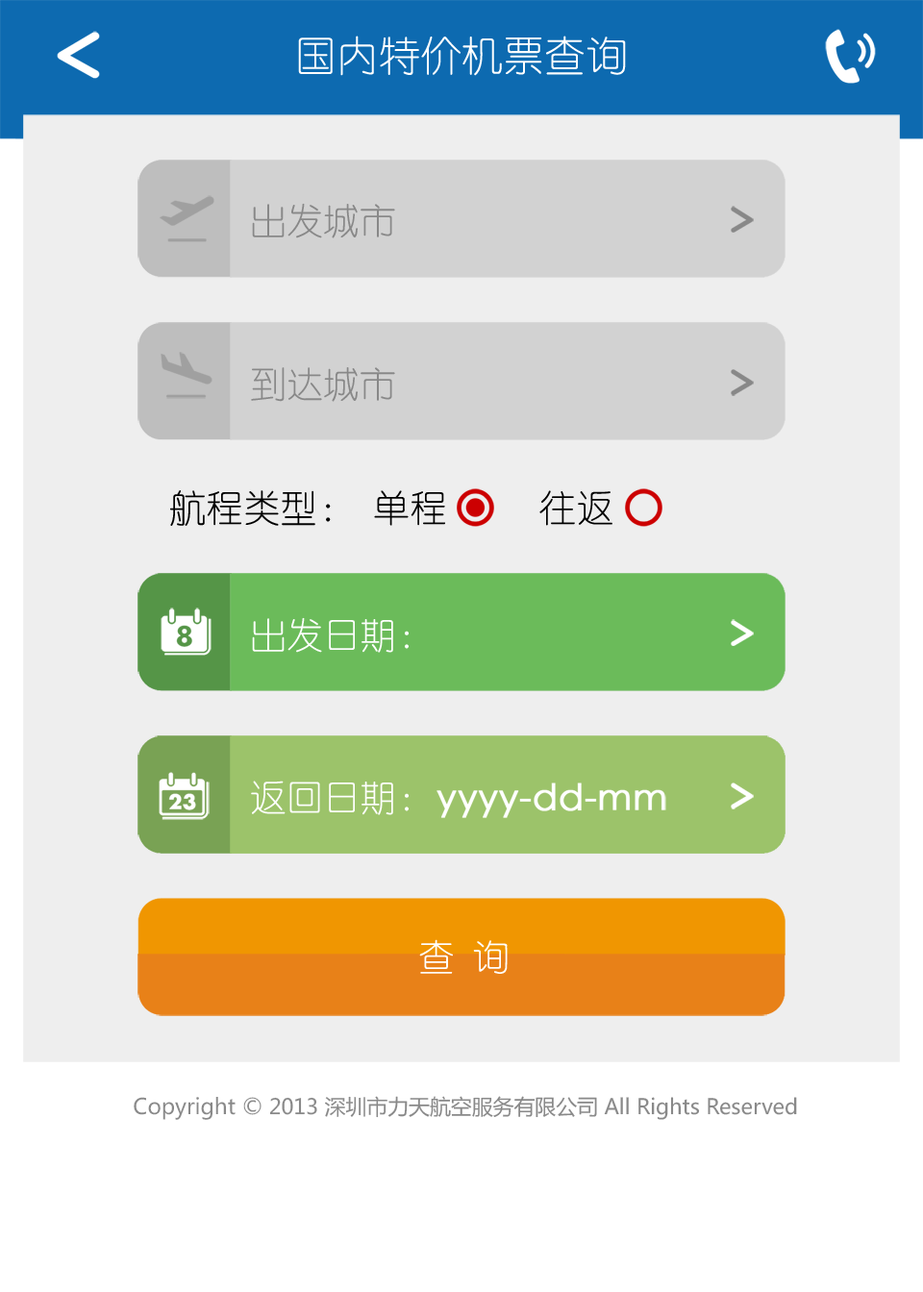
<style>
.page{position:relative;width:923px;height:1292px;background:#eeeeee}
.page>*{position:absolute;margin:0}
.t1{font:41.5px "YouYuan";color:#ffffff}
.t2{font:36.5px "YouYuan";color:#888888}
.t3{font:37.1px "YouYuan";color:#000000}
.t4{font:36.5px "YouYuan";color:#ffffff}
.t5{font:36.5px "STXihei";color:#ffffff;font-weight:bold}
.t6{font:21px "MicrosoftYaHei";color:#898989}
.t7{font:21.6px "MicrosoftYaHei";color:#898989}
</style>
<div class="page">
<p class="t1" style="left:298px;top:36px;width:328px;height:40px">国内特价机票查询</p>
<p class="t2" style="left:252px;top:203px;width:143px;height:35px">出发城市</p>
<p class="t2" style="left:251px;top:367px;width:144px;height:35px">到达城市</p>
<p class="t3" style="left:170px;top:490px;width:442px;height:36px">航程类型： 单程     往返</p>
<p class="t4" style="left:252px;top:617px;width:157px;height:36px">出发日期：</p>
<p class="t4" style="left:251px;top:781px;width:158px;height:34px">返回日期：</p>
<p class="t5" style="left:436px;top:783px;width:230px;height:35px">yyyy-dd-mm</p>
<p class="t4" style="left:419px;top:939px;width:89px;height:35px">查 询</p>
<p class="t6" style="left:134px;top:1096px;width:663px;height:24px"><span class="t7">Copyright ©</span> 2013 深圳市力天航空服务有限公司 All Rights Reserved</p>
</div>
